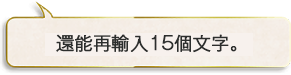
<style>
.page{position:relative;width:291px;height:75px;background:#ffffff}
.page>*{position:absolute;margin:0}
.t1{font:18px "GothicMB101Pr6N-Light";color:#2c2e2d;font-weight:bold}
</style>
<div class="page">
<p class="t1" style="left:56px;top:34px;width:181px;height:19px">還能再輸入15個文字。</p>
</div>
